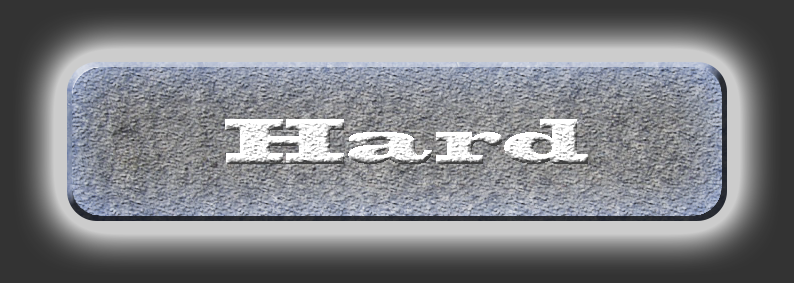
<style>
.page{position:relative;width:794px;height:283px}
.page>*{position:absolute;margin:0}
.t1{font:60px "BlackoakStd";color:#ffffff}
</style>
<div class="page">
<p class="t1" style="left:225px;top:119px;width:363px;height:45px">Hard</p>
</div>
